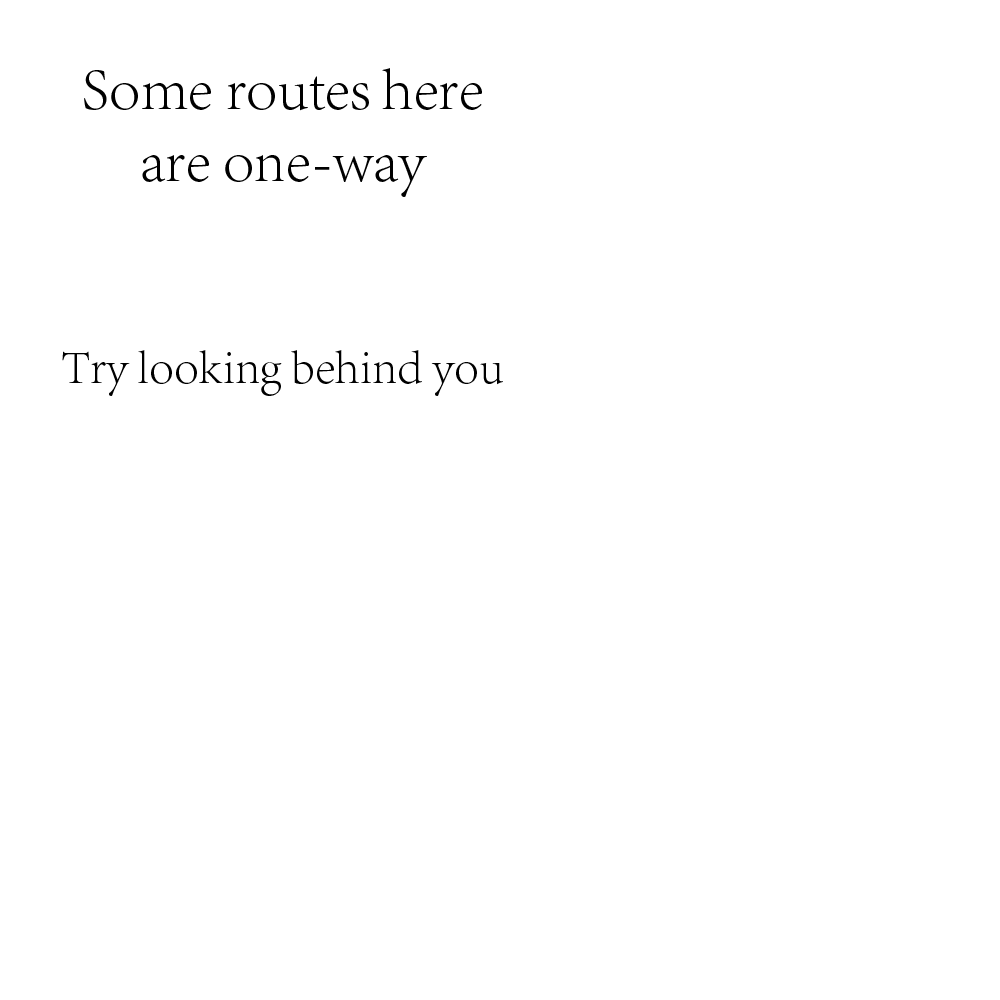
<style>
.page{position:relative;width:1000px;height:1000px;background:#ffffff}
.page>*{position:absolute;margin:0}
.t1{font:60px "AdobeSongStd-Light";color:#000000}
.t2{font:48px "AdobeSongStd-Light";color:#000000}
</style>
<div class="page">
<p class="t1" style="left:62px;top:68px;width:441px;height:328px;text-align:center">Some routes here<br>are one-way<br><br><br><span class="t2">Try looking behind you</span></p>
</div>
